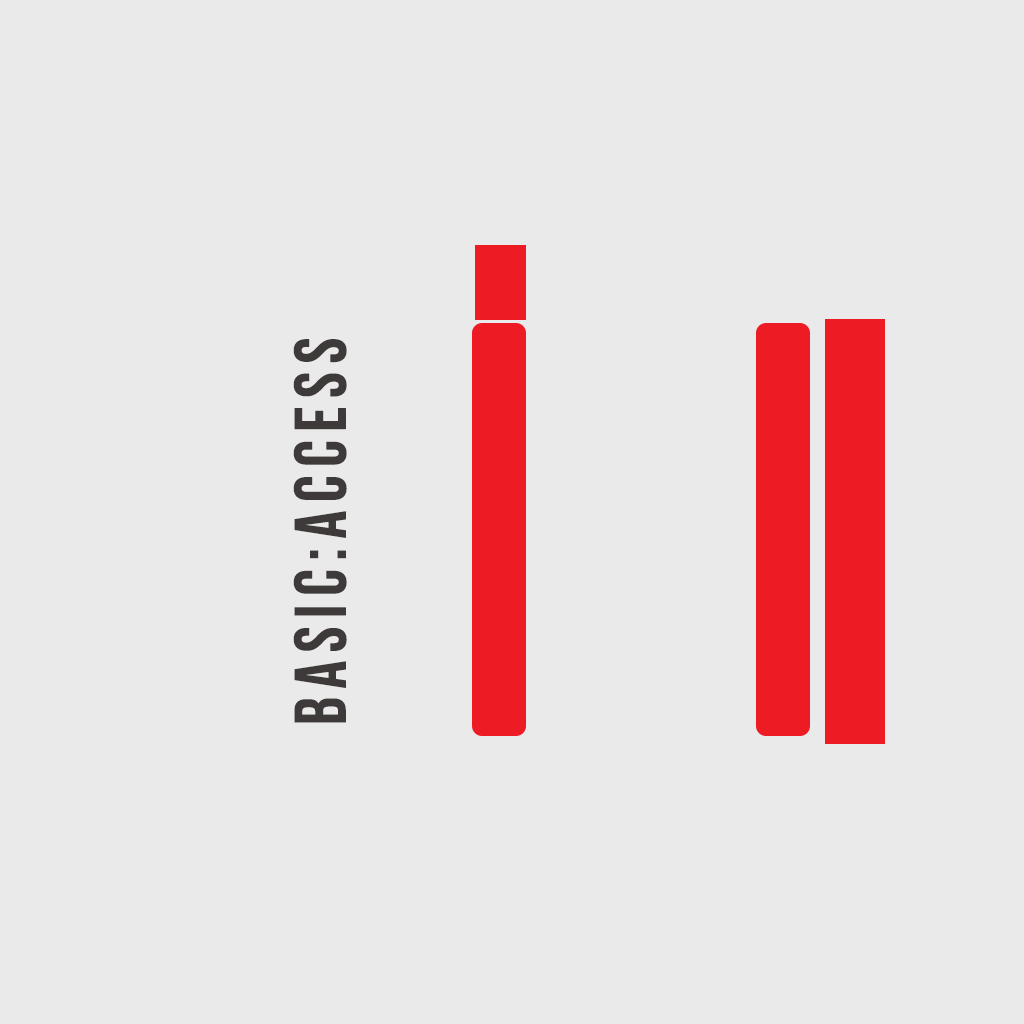
<style>
.page{position:relative;width:1024px;height:1024px;background:#eaeaea}
.page>*{position:absolute;margin:0}
.t1{font:72.4px "BebasNeue-Regular";letter-spacing:0.1em;color:#3f3a3a;text-transform:uppercase;font-weight:bold;scale:0.95 1}
</style>
<div class="page">
<p class="t1" style="left:293px;top:339px;width:54px;height:384px;rotate:-90deg">basic:Access</p>
</div>
